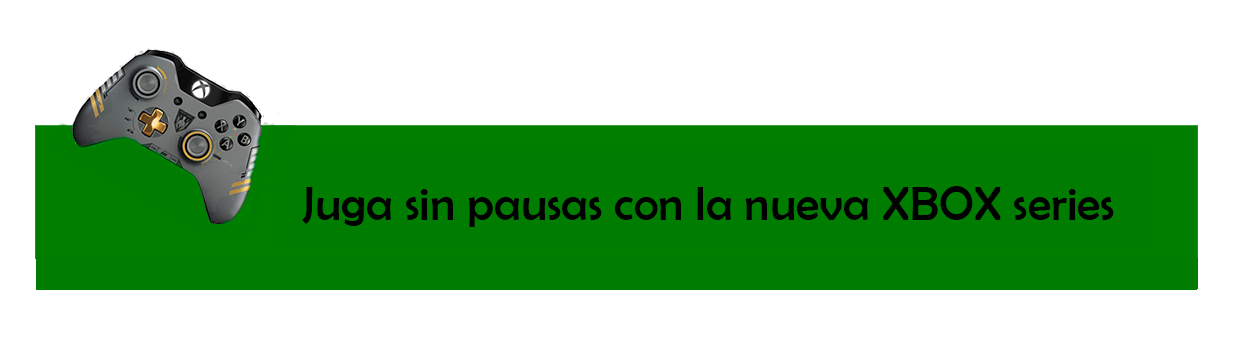
<style>
.page{position:relative;width:1253px;height:355px;background:#ffffff}
.page>*{position:absolute;margin:0}
.t1{font:48px "BerlinSansFB-Reg";color:#000000}
</style>
<div class="page">
<p class="t1" style="left:302px;top:186px;width:812px;height:41px">Juga sin pausas con la nueva XBOX series X</p>
</div>
